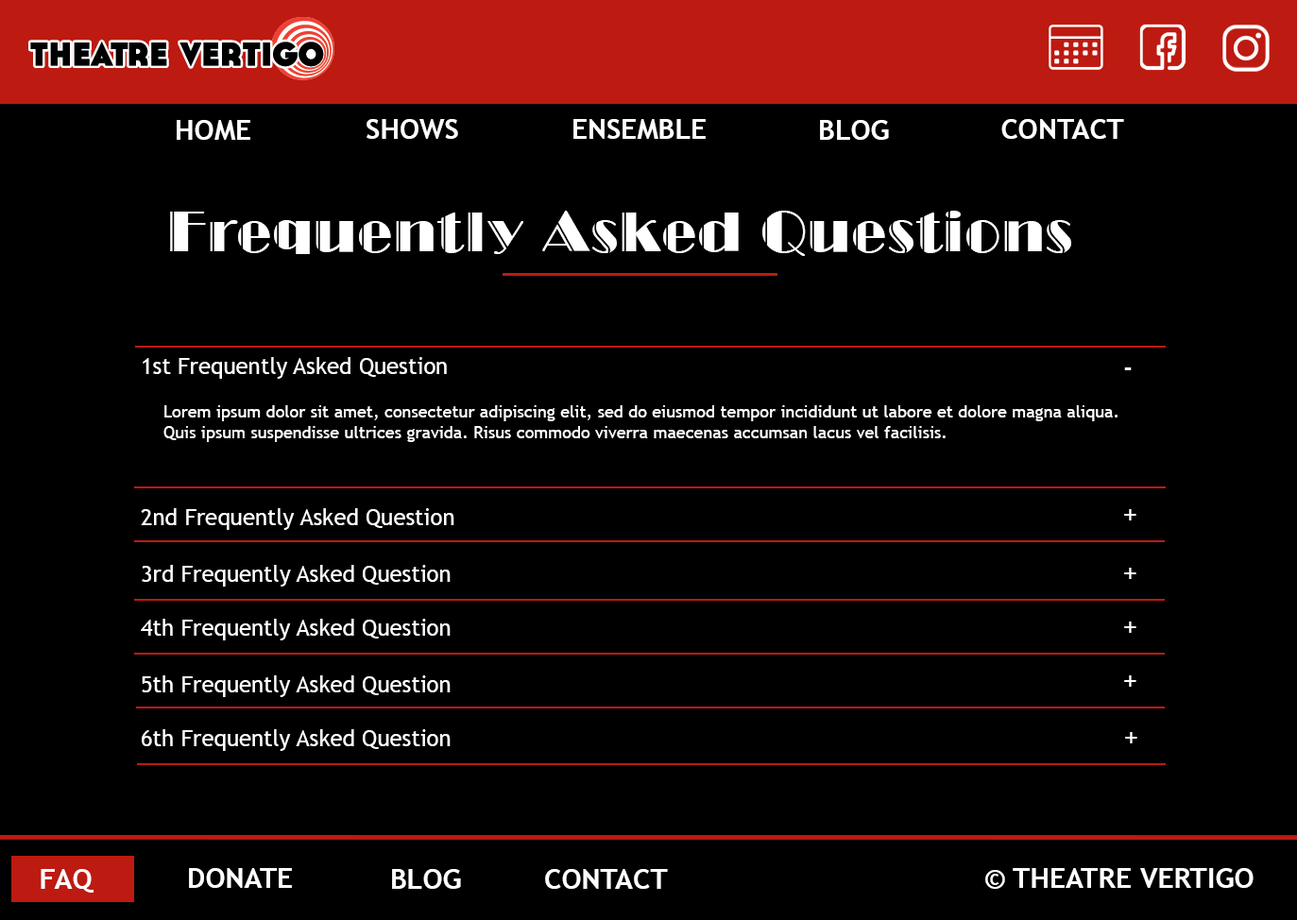
<style>
.page{position:relative;width:1297px;height:920px;background:#000000}
.page>*{position:absolute;margin:0}
.t1{font:28.3px "TrebuchetMS-Bold";color:#fefefe;text-transform:uppercase}
.t2{font:56.7px "LTCBroadway-Engraved";color:#ffffff}
.t3{font:22.7px "TrebuchetMS";color:#ffffff}
.t4{font:28.3px "TrebuchetMS";color:#ffffff}
.t5{font:17px "TrebuchetMS";color:#ffffff}
.t6{font:28.3px "TrebuchetMS-Bold";color:#ffffff;text-transform:uppercase}
</style>
<div class="page">
<p class="t1" style="left:177px;top:120px;width:73px;height:20px">Home</p>
<p class="t1" style="left:366px;top:119px;width:92px;height:20px">Shows</p>
<p class="t1" style="left:573px;top:119px;width:132px;height:20px">Ensemble</p>
<p class="t1" style="left:820px;top:120px;width:69px;height:20px">Blog</p>
<p class="t1" style="left:1001px;top:119px;width:123px;height:20px">Contact</p>
<p class="t2" style="left:170px;top:211px;width:901px;height:45px">Frequently Asked Questions</p>
<p class="t3" style="left:143px;top:357px;width:304px;height:22px">1st Frequently Asked Question</p>
<p class="t4" style="left:1124px;top:367px;width:7px;height:3px">-</p>
<p class="t5" style="left:163px;top:405px;width:954px;height:37px">Lorem ipsum dolor sit amet, consectetur adipiscing elit, sed do eiusmod tempor incididunt ut labore et dolore magna aliqua. Quis ipsum suspendisse ultrices gravida. Risus commodo viverra maecenas accumsan lacus vel facilisis.</p>
<p class="t3" style="left:141px;top:508px;width:313px;height:22px">2nd Frequently Asked Question</p>
<p class="t4" style="left:1124px;top:509px;width:12px;height:11px">+</p>
<p class="t3" style="left:142px;top:565px;width:308px;height:21px">3rd Frequently Asked Question</p>
<p class="t4" style="left:1124px;top:568px;width:12px;height:11px">+</p>
<p class="t3" style="left:141px;top:619px;width:309px;height:21px">4th Frequently Asked Question</p>
<p class="t4" style="left:1124px;top:621px;width:12px;height:12px">+</p>
<p class="t3" style="left:142px;top:675px;width:308px;height:22px">5th Frequently Asked Question</p>
<p class="t4" style="left:1124px;top:675px;width:12px;height:11px">+</p>
<p class="t3" style="left:142px;top:729px;width:308px;height:22px">6th Frequently Asked Question</p>
<p class="t4" style="left:1125px;top:732px;width:12px;height:11px">+</p>
<p class="t6" style="left:41px;top:869px;width:52px;height:23px">FAQ</p>
<p class="t6" style="left:189px;top:868px;width:103px;height:20px">Donate</p>
<p class="t6" style="left:392px;top:869px;width:69px;height:20px">Blog</p>
<p class="t6" style="left:545px;top:869px;width:123px;height:20px">Contact</p>
<p class="t6" style="left:985px;top:868px;width:268px;height:21px">© Theatre Vertigo</p>
</div>
